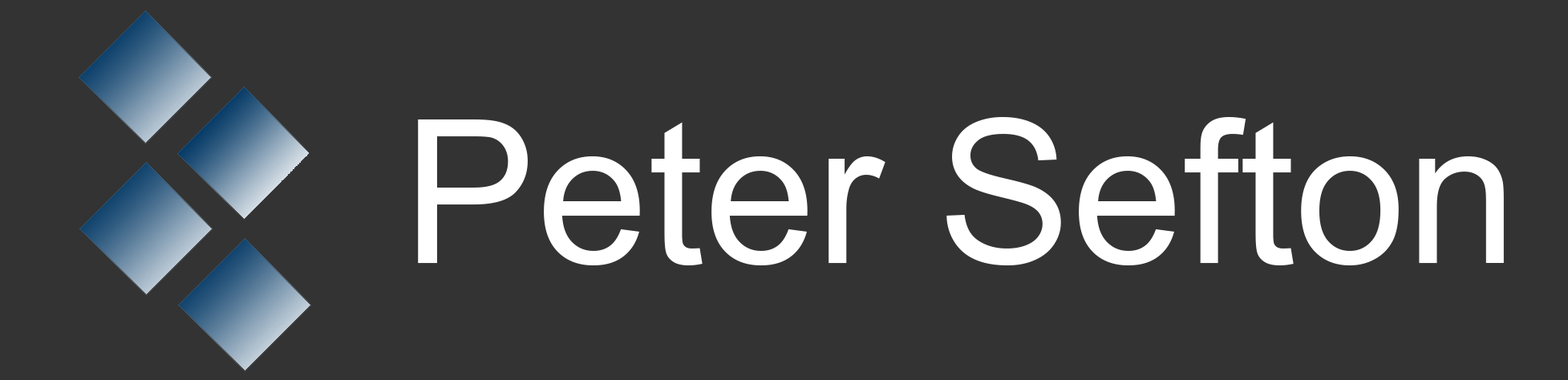
<style>
.page{position:relative;width:1568px;height:380px;background:#333333}
.page>*{position:absolute;margin:0}
.t1{font:200.5px "ArialMT";color:#ffffff}
</style>
<div class="page">
<p class="t1" style="left:418px;top:117px;width:1086px;height:148px">Peter Sefton</p>
</div>
